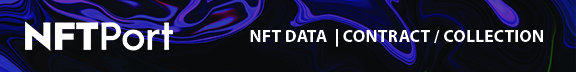
<style>
.page{position:relative;width:576px;height:72px}
.page>*{position:absolute;margin:0}
.t1{font:17.8px "MyriadPro-Bold";color:#ffffff}
</style>
<div class="page">
<p class="t1" style="left:250px;top:29px;width:293px;height:18px">NFT DATA  | CONTRACT / COLLECTION</p>
</div>
